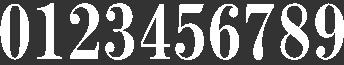
<style>
.page{position:relative;width:344px;height:65px;background:#333333}
.page>*{position:absolute;margin:0}
.t1{font:74px "HGMinchoE";letter-spacing:0.025em;color:#ffffff;scale:0.9 1}
</style>
<div class="page">
<p class="t1" style="left:0px;top:3px;width:344px;height:57px">0123456789</p>
</div>
